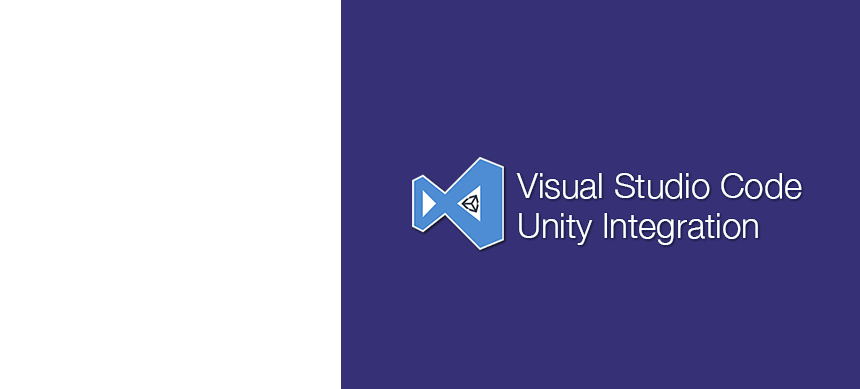
<style>
.page{position:relative;width:860px;height:389px;background:#363177}
.page>*{position:absolute;margin:0}
.t1{font:34.8px/39.8px "HelveticaNeue-Light";color:#ffffff}
</style>
<div class="page">
<p class="t1" style="left:516px;top:173px;width:286px;height:72px">Visual Studio Code<br>Unity Integration</p>
</div>
